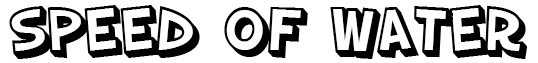
<style>
.page{position:relative;width:538px;height:63px;background:#ffffff}
.page>*{position:absolute;margin:0}
.t1{font:61.4px "SFSlapstickComicShaded";color:#000000}
</style>
<div class="page">
<p class="t1" style="left:9px;top:5px;width:519px;height:54px">SPEED OF water</p>
</div>
